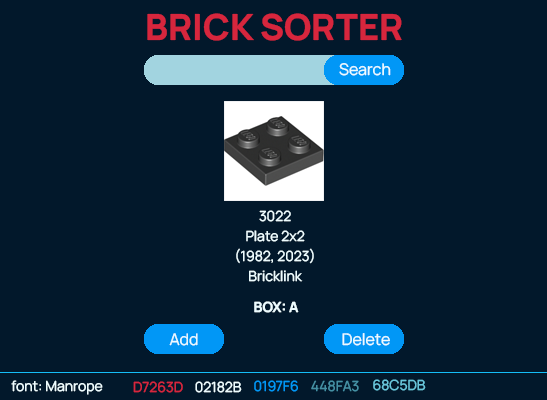
<style>
.page{position:relative;width:547px;height:400px;background:#02182b}
.page>*{position:absolute;margin:0}
.t1{font:36px "ManropeExtraLight-ExtraBold";color:#d7263d}
.t2{font:16px "ManropeExtraLight-Regular";color:#edfcff}
.t3{font:14px/20px "ManropeExtraLight-Regular";color:#edfcff}
.t4{font:14px "ManropeExtraLight-Bold";color:#edfcff}
.t5{font:14px "ManropeExtraLight-Regular";color:#edfcff}
.t6{font:14px "ManropeExtraLight-Regular";color:#d7263d}
.t7{font:14px "ManropeExtraLight-Regular";color:#0197f6}
.t8{font:14px "ManropeExtraLight-Regular";color:#448fa3}
.t9{font:14px "ManropeExtraLight-Regular";color:#68c5db}
</style>
<div class="page">
<p class="t1" style="left:147px;top:13px;width:255px;height:28px">BRICK SORTER</p>
<p class="t2" style="left:339px;top:63px;width:52px;height:13px">Search</p>
<p class="t3" style="left:236px;top:210px;width:78px;height:72px;text-align:center">3022<br>Plate 2x2<br>(1982, 2023)<br>Bricklink</p>
<p class="t4" style="left:254px;top:301px;width:45px;height:12px">BOX: A</p>
<p class="t2" style="left:169px;top:333px;width:29px;height:13px">Add</p>
<p class="t2" style="left:342px;top:333px;width:48px;height:13px">Delete</p>
<p class="t5" style="left:11px;top:380px;width:92px;height:15px">font: Manrope</p>
<p class="t6" style="left:133px;top:381px;width:50px;height:12px">D7263D</p>
<p class="t5" style="left:195px;top:381px;width:47px;height:12px">02182B</p>
<p class="t7" style="left:254px;top:380px;width:44px;height:12px">0197F6</p>
<p class="t8" style="left:311px;top:380px;width:48px;height:12px">448FA3</p>
<p class="t9" style="left:373px;top:379px;width:53px;height:12px">68C5DB</p>
</div>
